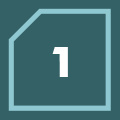
<style>
.page{position:relative;width:120px;height:120px;background:#336166}
.page>*{position:absolute;margin:0}
.t1{font:48px "TransformersMovie";color:#ffffff}
</style>
<div class="page">
<p class="t1" style="left:52px;top:47px;width:16px;height:30px">1</p>
</div>
